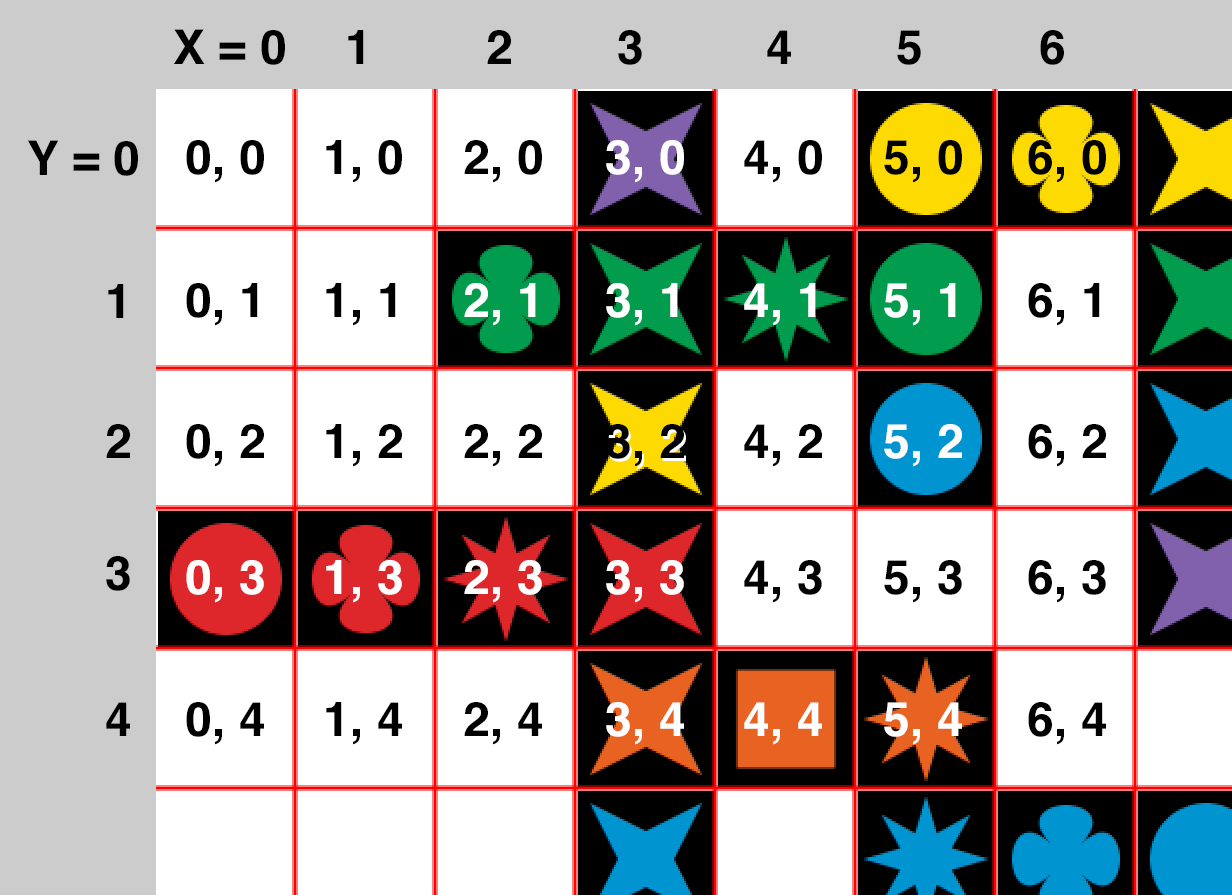
<style>
.page{position:relative;width:1232px;height:895px;background:#ffffff}
.page>*{position:absolute;margin:0}
.t1{font:48px "Helvetica-Bold";color:#000000}
.t2{font:48px "Helvetica-Bold";color:#ffffff}
</style>
<div class="page">
<p class="t1" style="left:174px;top:29px;width:111px;height:36px">X = 0</p>
<p class="t1" style="left:348px;top:30px;width:16px;height:34px">1</p>
<p class="t1" style="left:487px;top:30px;width:24px;height:34px">2</p>
<p class="t1" style="left:618px;top:30px;width:24px;height:35px">3</p>
<p class="t1" style="left:767px;top:30px;width:24px;height:34px">4</p>
<p class="t1" style="left:897px;top:30px;width:24px;height:35px">5</p>
<p class="t1" style="left:1040px;top:30px;width:24px;height:35px">6</p>
<p class="t1" style="left:27px;top:140px;width:111px;height:36px">Y = 0</p>
<p class="t1" style="left:186px;top:140px;width:78px;height:43px">0, 0</p>
<p class="t1" style="left:326px;top:140px;width:76px;height:43px">1, 0</p>
<p class="t1" style="left:464px;top:140px;width:78px;height:43px">2, 0</p>
<p class="t2" style="left:606px;top:140px;width:78px;height:43px">3, 0</p>
<p class="t1" style="left:744px;top:140px;width:78px;height:43px">4, 0</p>
<p class="t1" style="left:884px;top:140px;width:78px;height:43px">5, 0</p>
<p class="t1" style="left:1028px;top:140px;width:78px;height:43px">6, 0</p>
<p class="t1" style="left:108px;top:284px;width:16px;height:34px">1</p>
<p class="t1" style="left:186px;top:283px;width:72px;height:43px">0, 1</p>
<p class="t1" style="left:326px;top:283px;width:70px;height:43px">1, 1</p>
<p class="t2" style="left:464px;top:283px;width:72px;height:43px">2, 1</p>
<p class="t2" style="left:606px;top:283px;width:72px;height:43px">3, 1</p>
<p class="t2" style="left:744px;top:283px;width:72px;height:43px">4, 1</p>
<p class="t2" style="left:884px;top:283px;width:72px;height:43px">5, 1</p>
<p class="t1" style="left:1028px;top:283px;width:72px;height:43px">6, 1</p>
<p class="t1" style="left:106px;top:424px;width:24px;height:34px">2</p>
<p class="t1" style="left:186px;top:424px;width:78px;height:43px">0, 2</p>
<p class="t1" style="left:326px;top:424px;width:76px;height:43px">1, 2</p>
<p class="t1" style="left:464px;top:424px;width:78px;height:43px">2, 2</p>
<p class="t1" style="left:606px;top:424px;width:78px;height:43px">3, 2</p>
<p class="t1" style="left:744px;top:424px;width:78px;height:43px">4, 2</p>
<p class="t2" style="left:884px;top:424px;width:78px;height:43px">5, 2</p>
<p class="t1" style="left:1028px;top:424px;width:78px;height:43px">6, 2</p>
<p class="t1" style="left:106px;top:556px;width:24px;height:35px">3</p>
<p class="t2" style="left:186px;top:560px;width:78px;height:43px">0, 3</p>
<p class="t2" style="left:326px;top:560px;width:76px;height:43px">1, 3</p>
<p class="t2" style="left:464px;top:560px;width:78px;height:43px">2, 3</p>
<p class="t2" style="left:606px;top:560px;width:78px;height:43px">3, 3</p>
<p class="t1" style="left:744px;top:560px;width:78px;height:43px">4, 3</p>
<p class="t1" style="left:884px;top:560px;width:78px;height:43px">5, 3</p>
<p class="t1" style="left:1028px;top:560px;width:78px;height:43px">6, 3</p>
<p class="t1" style="left:106px;top:702px;width:24px;height:34px">4</p>
<p class="t1" style="left:186px;top:702px;width:78px;height:43px">0, 4</p>
<p class="t1" style="left:326px;top:702px;width:76px;height:43px">1, 4</p>
<p class="t1" style="left:464px;top:702px;width:78px;height:43px">2, 4</p>
<p class="t2" style="left:606px;top:702px;width:78px;height:43px">3, 4</p>
<p class="t2" style="left:744px;top:702px;width:78px;height:43px">4, 4</p>
<p class="t2" style="left:884px;top:702px;width:78px;height:43px">5, 4</p>
<p class="t1" style="left:1028px;top:702px;width:78px;height:43px">6, 4</p>
</div>
